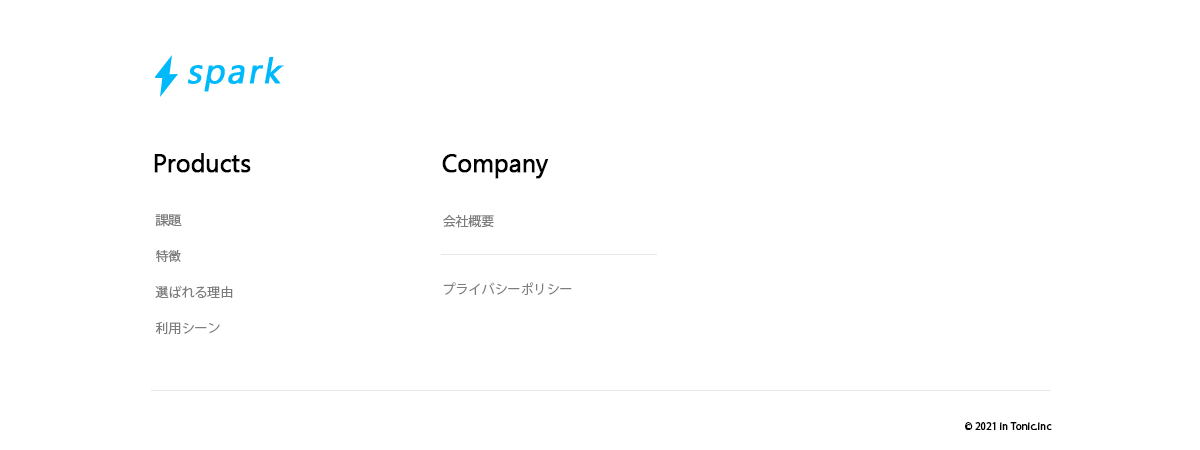
<style>
.page{position:relative;width:1200px;height:450px;background:#ffffff}
.page>*{position:absolute;margin:0}
.t1{font:25px "Gadugi";letter-spacing:-0.02em;color:#000000;font-weight:bold}
.t2{font:13px/36px "KozGoPr6N-Regular";color:#7d7d7d}
.t3{font:13px "KozGoPr6N-Regular";color:#7d7d7d}
.t4{font:10px "KozGoPr6N-Regular";letter-spacing:-0.02em;color:#000000;font-weight:bold}
</style>
<div class="page">
<p class="t1" style="left:154px;top:153px;width:97px;height:20px">Products</p>
<p class="t1" style="left:442px;top:154px;width:107px;height:25px">Company</p>
<p class="t2" style="left:155px;top:214px;width:78px;height:121px">課題<br>特徴<br>選ばれる理由<br>利用シーン</p>
<p class="t3" style="left:443px;top:215px;width:129px;height:80px">会社概要<br><br><br>プライバシーポリシー</p>
<p class="t4" style="left:965px;top:422px;width:87px;height:8px">© 2021 in Tonic.inc</p>
</div>
